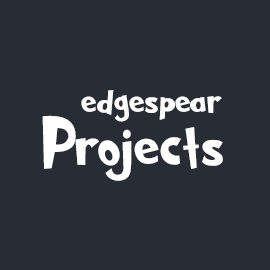
<style>
.page{position:relative;width:270px;height:270px;background:#282c34}
.page>*{position:absolute;margin:0}
.t1{font:39.6px "Grinched2.0";color:#ffffff}
.t2{font:64.8px "Grinched2.0";color:#ffffff}
</style>
<div class="page">
<p class="t1" style="left:81px;top:90px;width:141px;height:32px">edgespear</p>
<p class="t2" style="left:42px;top:115px;width:181px;height:66px">Projects</p>
</div>
